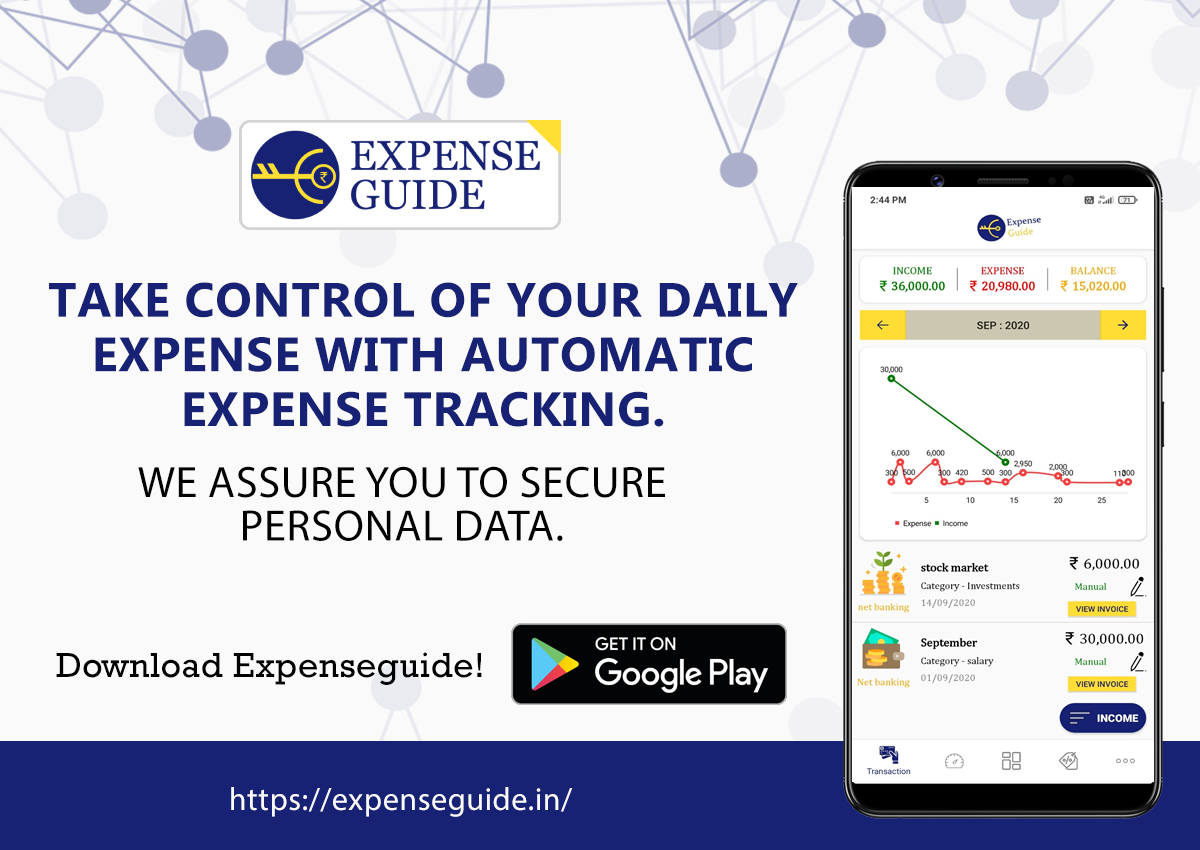
<style>
.page{position:relative;width:1200px;height:850px;background:#fafafa}
.page>*{position:absolute;margin:0}
.t1{font:48.3px/54.6px "MyanmarText-Bold";letter-spacing:0.015em;color:#172274;text-transform:uppercase}
.t2{font:44.3px "MyriadPro-Regular";letter-spacing:0.015em;color:#020202;text-transform:uppercase}
.t3{font:35.3px "Rockwell";letter-spacing:0.015em;color:#020202}
.t4{font:32.3px "MyriadPro-Regular";letter-spacing:0.015em;color:#fafafa}
</style>
<div class="page">
<p class="t1" style="left:49px;top:282px;width:749px;height:145px;text-align:center">Take control of your daily expense with Automatic expense tracking.</p>
<p class="t2" style="left:138px;top:466px;width:527px;height:75px">We assure you to secure personal data.</p>
<p class="t3" style="left:56px;top:652px;width:426px;height:33px">Download Expenseguide!</p>
<p class="t4" style="left:231px;top:787px;width:342px;height:30px">https://expenseguide.in/</p>
</div>
